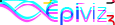
<style>
.page{position:relative;width:115px;height:25px;background:#ffffff}
.page>*{position:absolute;margin:0}
.t1{font:26px "BauhausITCbyBT-Medium";scale:1.05 1}
.t2{font:26px "BauhausITCbyBT-Light";scale:1.05 1}
.t3{font:18.1px "BauhausITCbyBT-Medium";color:#d5ffff}
</style>
<div class="page">
<p class="t1" style="left:46px;top:1px;width:61px;height:24px">Epi<span class="t2">viz</span></p>
<p class="t3" style="left:106px;top:12px;width:9px;height:13px">3</p>
</div>
